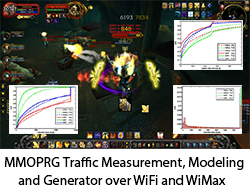
<style>
.page{position:relative;width:250px;height:190px;background:#ffffff}
.page>*{position:absolute;margin:0}
.t1{font:14px "MyriadHebrew-Regular";color:#000000}
</style>
<div class="page">
<p class="t1" style="left:4px;top:157px;width:240px;height:13px">MMOPRG Traffic Measurement, Modeling</p>
<p class="t1" style="left:18px;top:175px;width:208px;height:10px">and Generator over WiFi and WiMax</p>
</div>
